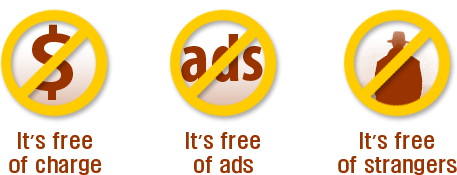
<style>
.page{position:relative;width:457px;height:175px;background:#ffffff}
.page>*{position:absolute;margin:0}
.t1{font:92px "MyriadPro-SemiboldSemiExt";color:#993300}
.t2{font:70px "MyriadPro-BoldCond";color:#993300}
.t3{font:20px "HYKHeadLineStd-Medium";color:#993300}
.t4{font:20px "MalgunGothicBold";color:#993300}
</style>
<div class="page">
<p class="t1" style="left:31px;top:24px;width:42px;height:76px">$</p>
<p class="t2" style="left:181px;top:34px;width:82px;height:48px">ads</p>
<p class="t3" style="left:9px;top:132px;width:92px;height:43px;text-align:center">It<span class="t4">’</span>s free<br>of charge</p>
<p class="t3" style="left:186px;top:132px;width:74px;height:42px;text-align:center">It<span class="t4">’</span>s free<br>of ads</p>
<p class="t3" style="left:338px;top:132px;width:119px;height:43px;text-align:center">It<span class="t4">’</span>s free<br>of strangers</p>
</div>
